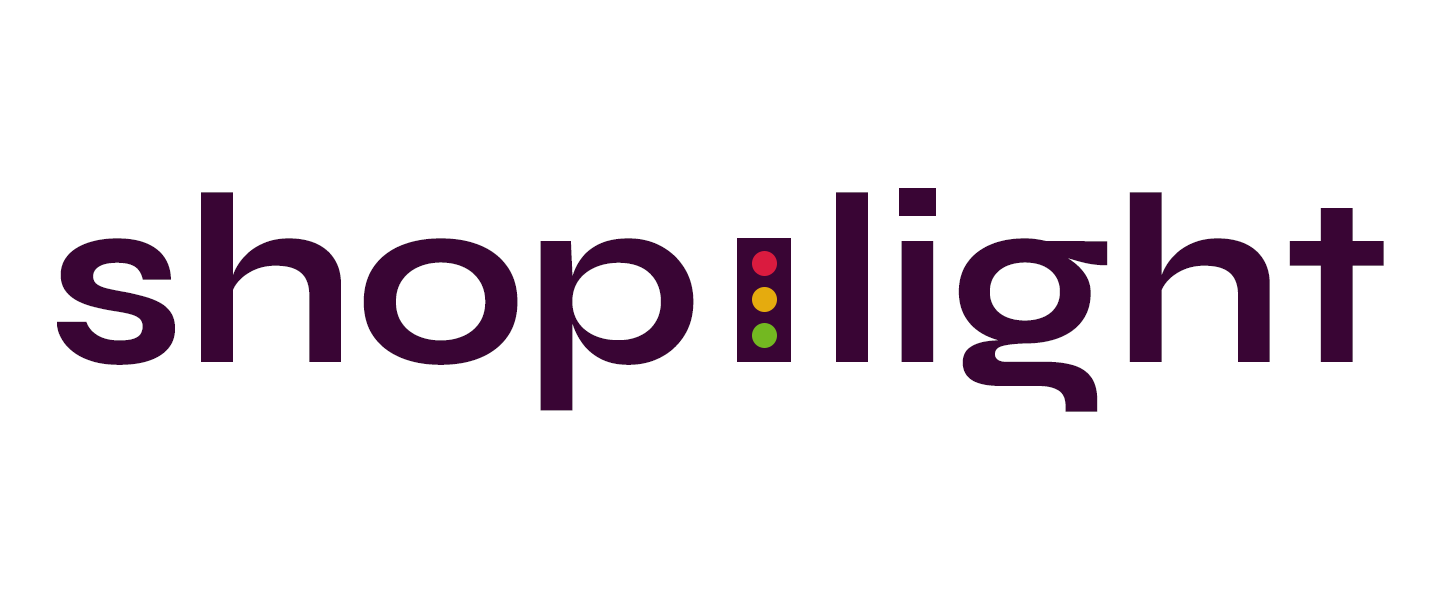
<style>
.page{position:relative;width:1440px;height:600px;background:#ffffff}
.page>*{position:absolute;margin:0}
.t1{font:243px "Syne-Bold";color:#390534}
</style>
<div class="page">
<p class="t1" style="left:57px;top:188px;width:1327px;height:224px">shop  light</p>
</div>
